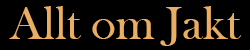
<style>
.page{position:relative;width:250px;height:50px;background:#000000}
.page>*{position:absolute;margin:0}
.t1{font:48px "BaskOldFace";color:#e9ae61}
</style>
<div class="page">
<p class="t1" style="left:9px;top:6px;width:232px;height:40px">Allt om Jakt</p>
</div>
